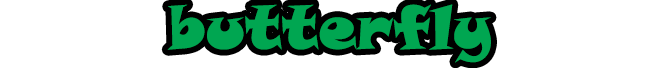
<style>
.page{position:relative;width:657px;height:68px;background:#ffffff}
.page>*{position:absolute;margin:0}
.t1{font:60px "SnapITC-Regular";color:#00a651}
</style>
<div class="page">
<p class="t1" style="left:167px;top:4px;width:324px;height:59px">butterfly</p>
</div>
